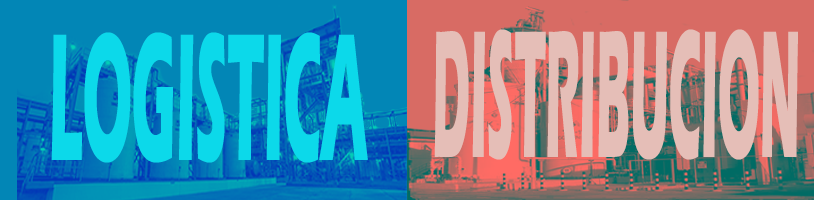
<style>
.page{position:relative;width:814px;height:200px}
.page>*{position:absolute;margin:0}
.t1{font:187.8px "ErasITC-Bold";color:#e5beb7;scale:0.26 1}
.t2{font:187.8px "ErasITC-Bold";color:#0cd9ea;scale:0.3 1}
</style>
<div class="page">
<p class="t1" style="left:434px;top:29px;width:364px;height:131px">DISTRIBUCION</p>
<p class="t2" style="left:51px;top:32px;width:317px;height:131px">LOGISTICA</p>
</div>
